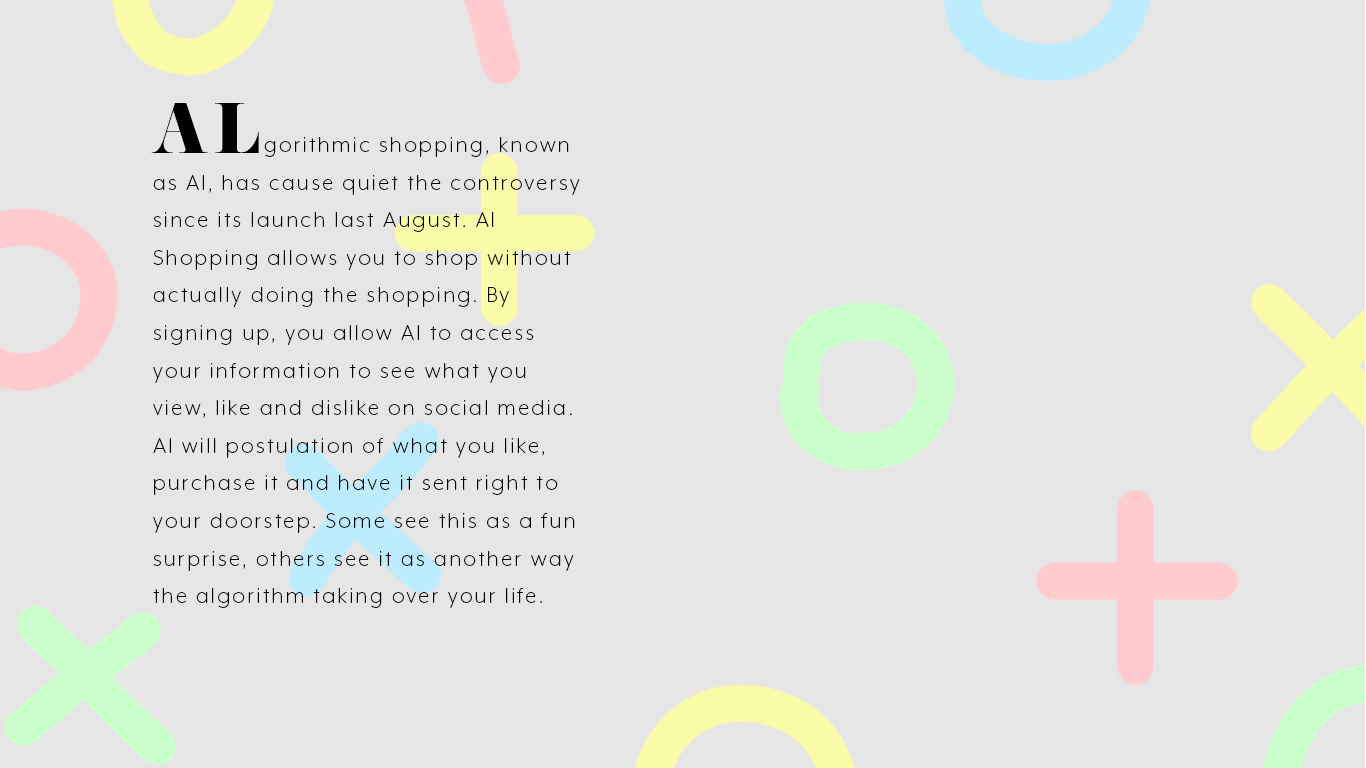
<style>
.page{position:relative;width:1366px;height:768px;background:#e6e6e6}
.page>*{position:absolute;margin:0}
.t1{font:62.6px "EloquentJFPro-Regular";letter-spacing:0.1em;color:#000000}
.t2{font:24px/37.6px "MrEavesXLModOT-Light";letter-spacing:0.1em;color:#000000}
</style>
<div class="page">
<p class="t1" style="left:151px;top:103px;width:108px;height:50px">AL</p>
<p class="t2" style="left:153px;top:137px;width:427px;height:471px">gorithmic shopping, known as Al, has cause quiet the controversy since its launch last August. Al <br>Shopping allows you to shop without actually doing the shopping. By <br>signing up, you allow Al to access your information to see what you view, like and dislike on social media. Al will postulation of what you like, purchase it and have it sent right to your doorstep. Some see this as a fun surprise, others see it as another way the algorithm taking over your life.</p>
</div>
